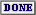
<style>
.page{position:relative;width:36px;height:15px;background:#d4d1d1}
.page>*{position:absolute;margin:0}
.t1{font:10px "TimesNewRomanPS-BoldMT"}
</style>
<div class="page">
<p class="t1" style="left:4px;top:4px;width:28px;height:7px">DONE</p>
</div>
